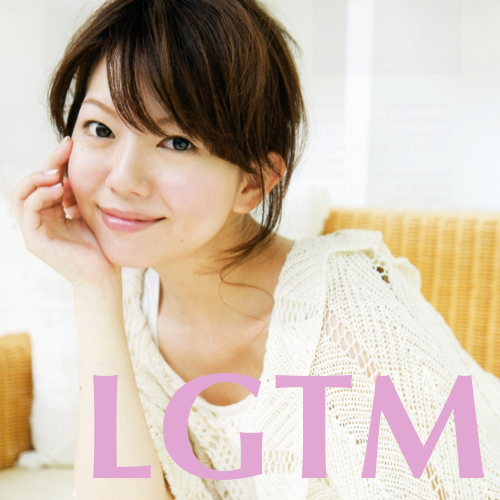
<style>
.page{position:relative;width:500px;height:500px}
.page>*{position:absolute;margin:0}
.t1{font:150px "Optima-Bold";color:#e1a6d1}
</style>
<div class="page">
<p class="t1" style="left:93px;top:373px;width:392px;height:107px">LGTM</p>
</div>
